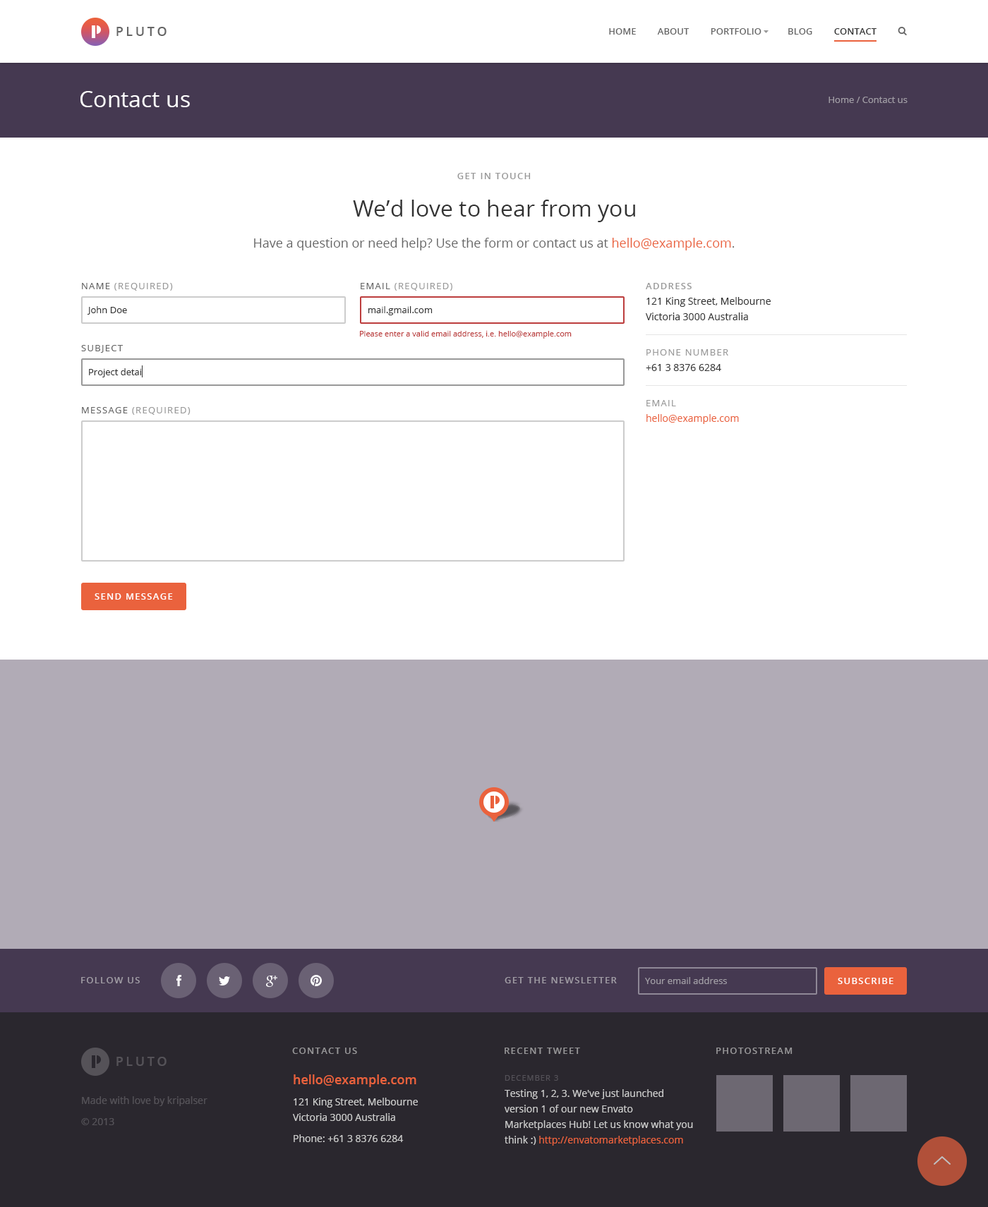
<style>
.page{position:relative;width:988px;height:1207px;background:#ffffff}
.page>*{position:absolute;margin:0}
.t1{font:12.7px "OpenSans-Semibold";letter-spacing:0.2em;color:#666666;text-transform:uppercase}
.t2{font:9.2px "OpenSans-Semibold";color:#666666;text-transform:uppercase}
.t3{font:9.2px "OpenSans-Semibold";color:#333333;text-transform:uppercase}
.t4{font:22.6px "OpenSans";color:#ffffff}
.t5{font:9.2px "OpenSans";color:#a09ca4}
.t6{font:9.2px "OpenSans-Semibold";letter-spacing:0.1em;color:#999999;text-transform:uppercase}
.t7{font:22.6px "OpenSans";color:#333333}
.t8{font:12.7px "OpenSans";color:#666666}
.t9{font:12.7px "OpenSans";color:#ea623d}
.t10{font:9.2px "OpenSans";letter-spacing:0.1em;color:#999999;text-transform:uppercase}
.t11{font:9.2px "OpenSans";letter-spacing:0.1em;color:#666666;text-transform:uppercase}
.t12{font:9.9px/15.5px "OpenSans";color:#333333}
.t13{font:9.2px/15.5px "OpenSans-Semibold";letter-spacing:0.1em;color:#999999;text-transform:uppercase}
.t14{font:9.2px "OpenSans";color:#333333}
.t15{font:7.8px "OpenSans";color:#bc3d3d}
.t16{font:9.2px/15.5px "OpenSans";letter-spacing:0.1em;color:#999999;text-transform:uppercase}
.t17{font:9.9px/15.5px "OpenSans";color:#ea623d}
.t18{font:9.2px "OpenSans-Semibold";letter-spacing:0.1em;color:#ffffff;text-transform:uppercase}
.t19{font:9.2px "OpenSans-Semibold";letter-spacing:0.1em;color:#a09ca4;text-transform:uppercase}
.t20{font:9.2px "OpenSans-Semibold";letter-spacing:0.1em;color:#979698;text-transform:uppercase}
.t21{font:12.7px "OpenSans-Semibold";letter-spacing:0.2em;color:#555258;text-transform:uppercase}
.t22{font:9.9px/21.2px "OpenSans";color:#cccccc}
.t23{font:12.7px/16.9px "OpenSans-Semibold";color:#ea623d}
.t24{font:9.9px/15.5px "OpenSans";color:#cccccc}
.t25{font:7.8px "OpenSans";letter-spacing:0.1em;color:#545158;text-transform:uppercase}
.t26{font:9.9px/21.2px "OpenSans";color:#555258}
.t27{font:9.9px/16.2px "OpenSans";color:#cccccc}
</style>
<div class="page">
<p class="t1" style="left:116px;top:27px;width:51px;height:9px">Pluto</p>
<p class="t2" style="left:609px;top:28px;width:267px;height:7px">Home         About         Portfolio           Blog         <span class="t3">Contact</span></p>
<p class="t4" style="left:80px;top:91px;width:110px;height:16px">Contact us</p>
<p class="t5" style="left:828px;top:97px;width:79px;height:6px">Home / Contact us</p>
<p class="t6" style="left:457px;top:173px;width:74px;height:6px">Get in touch</p>
<p class="t7" style="left:353px;top:200px;width:282px;height:22px">We’d love to hear from you</p>
<p class="t8" style="left:254px;top:238px;width:480px;height:12px">Have a question or need help? Use the form or contact us at <span class="t9">hello@example.com</span>.</p>
<p class="t10" style="left:82px;top:283px;width:91px;height:8px"><span class="t11">Name </span>(required)</p>
<p class="t10" style="left:361px;top:283px;width:91px;height:8px"><span class="t11">Email </span>(required)</p>
<p class="t12" style="left:646px;top:283px;width:124px;height:37px"><span class="t13">Address<br></span>121 King Street, Melbourne<br>Victoria 3000 Australia</p>
<p class="t14" style="left:87px;top:306px;width:40px;height:9px">John Doe</p>
<p class="t14" style="left:368px;top:306px;width:65px;height:9px">mail.gmail.com</p>
<p class="t15" style="left:360px;top:331px;width:211px;height:8px">Please enter a valid email address, i.e. hello@example.com</p>
<p class="t11" style="left:81px;top:345px;width:42px;height:8px">Subject</p>
<p class="t12" style="left:646px;top:349px;width:82px;height:22px"><span class="t16">Phone number<br></span>+61 3 8376 6284</p>
<p class="t14" style="left:89px;top:368px;width:53px;height:9px">Project detai</p>
<p class="t17" style="left:646px;top:400px;width:93px;height:24px"><span class="t16">Email<br></span>hello@example.com</p>
<p class="t10" style="left:82px;top:407px;width:108px;height:8px"><span class="t11">Message </span>(required)</p>
<p class="t18" style="left:95px;top:593px;width:78px;height:7px">Send message</p>
<p class="t19" style="left:81px;top:977px;width:59px;height:7px">Follow us</p>
<p class="t19" style="left:504px;top:977px;width:113px;height:7px">Get the newsletter</p>
<p class="t5" style="left:645px;top:977px;width:82px;height:7px">Your email address</p>
<p class="t18" style="left:837px;top:978px;width:56px;height:6px">Subscribe</p>
<p class="t20" style="left:292px;top:1048px;width:65px;height:6px">Contact us</p>
<p class="t20" style="left:504px;top:1048px;width:76px;height:6px">Recent tweet</p>
<p class="t20" style="left:716px;top:1048px;width:76px;height:6px">Photostream</p>
<p class="t21" style="left:116px;top:1057px;width:51px;height:9px">Pluto</p>
<p class="t22" style="left:293px;top:1075px;width:125px;height:67px"><span class="t23">hello@example.com<br></span>121 King Street, Melbourne <br><span class="t24">Victoria 3000 Australia<br></span>Phone: +61 3 8376 6284</p>
<p class="t25" style="left:504px;top:1075px;width:54px;height:6px">December 3</p>
<p class="t26" style="left:81px;top:1096px;width:126px;height:29px">Made with love by kripalser<br>© 2013</p>
<p class="t24" style="left:504px;top:1089px;width:189px;height:57px"><span class="t27">Testing 1, 2, 3. We've just launched </span>version 1 of our new Envato Marketplaces Hub! Let us know what you think :) <span class="t17">http://envatomarketplaces.com</span></p>
</div>
